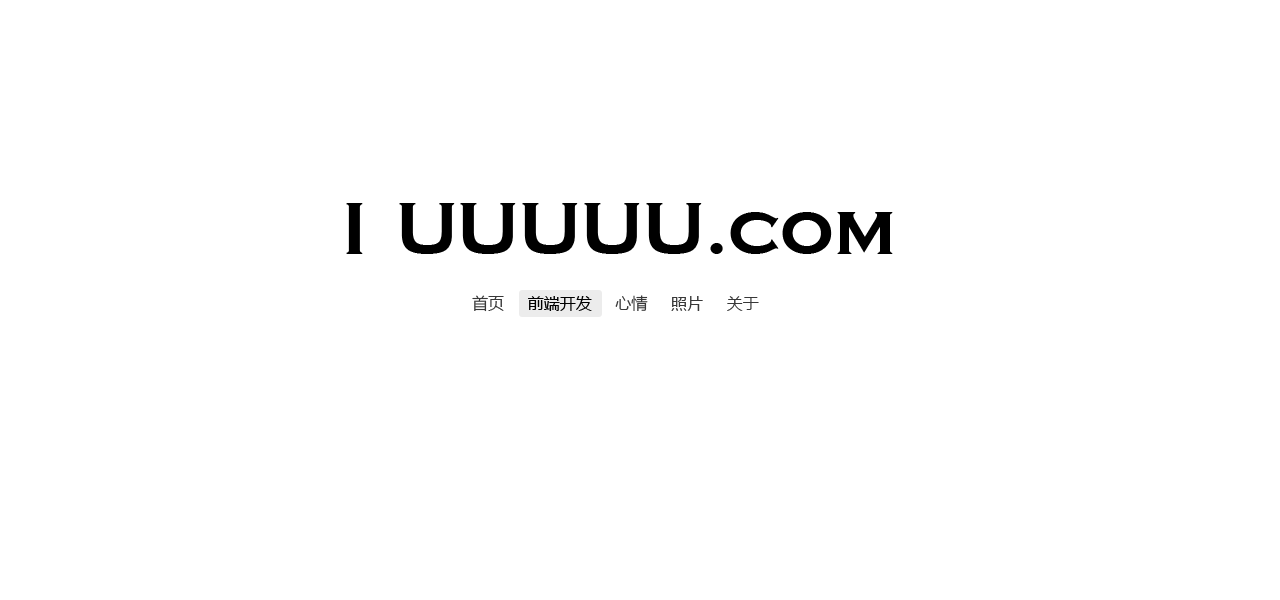
<style>
.page{position:relative;width:1280px;height:600px;background:#ffffff}
.page>*{position:absolute;margin:0}
.t1{font:72px "ACopperGothCpsExp";color:#000000}
.t2{font:16px "MicrosoftYaHei";color:#383838}
.t3{font:16px "MicrosoftYaHei";color:#000000}
</style>
<div class="page">
<p class="t1" style="left:346px;top:203px;width:547px;height:51px">I UUUUU.com</p>
<p class="t2" style="left:472px;top:295px;width:287px;height:17px">首页     <span class="t3">前端开发     </span>心情     照片     关于</p>
</div>
